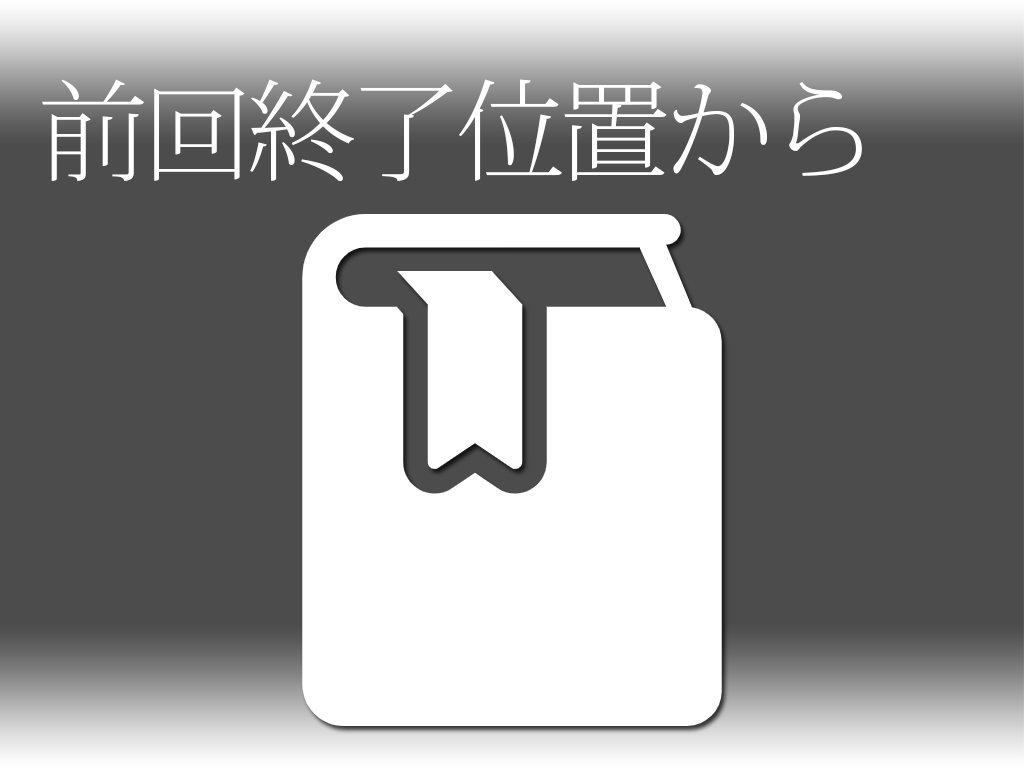
<style>
.page{position:relative;width:1024px;height:768px;background:#4c4c4c}
.page>*{position:absolute;margin:0}
.t1{font:110px "KozMinPr6N-ExtraLight";letter-spacing:-0.05em;color:#ffffff}
</style>
<div class="page">
<p class="t1" style="left:42px;top:79px;width:820px;height:103px">前回終了位置から</p>
</div>
